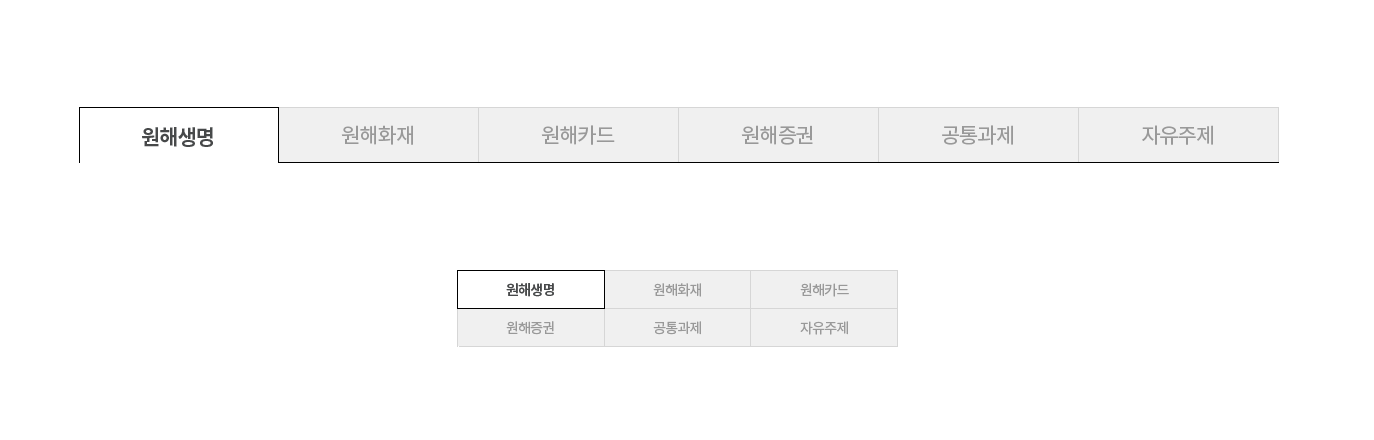
<style>
.page{position:relative;width:1374px;height:440px;background:#ffffff}
.page>*{position:absolute;margin:0}
.t1{font:21px "NotoSansKR-Regular";letter-spacing:-0.05em;color:#999999}
.t2{font:21px "NotoSansKR-Bold";letter-spacing:-0.05em;color:#47494a}
.t3{font:14px "NotoSansKR-Bold";letter-spacing:-0.05em;color:#47494a}
.t4{font:14px "NotoSansKR-Regular";letter-spacing:-0.05em;color:#999999}
</style>
<div class="page">
<p class="t1" style="left:341px;top:125px;width:72px;height:20px">원해화재</p>
<p class="t1" style="left:541px;top:125px;width:74px;height:20px">원해카드</p>
<p class="t1" style="left:741px;top:125px;width:72px;height:20px">원해증권</p>
<p class="t1" style="left:942px;top:125px;width:71px;height:20px">공통과제</p>
<p class="t1" style="left:1142px;top:125px;width:71px;height:20px">자유주제</p>
<p class="t2" style="left:142px;top:127px;width:71px;height:20px">원해생명</p>
<p class="t3" style="left:506px;top:283px;width:48px;height:14px">원해생명</p>
<p class="t4" style="left:653px;top:283px;width:48px;height:14px">원해화재</p>
<p class="t4" style="left:800px;top:283px;width:49px;height:14px">원해카드</p>
<p class="t4" style="left:506px;top:321px;width:48px;height:14px">원해증권</p>
<p class="t4" style="left:653px;top:321px;width:48px;height:14px">공통과제</p>
<p class="t4" style="left:800px;top:321px;width:48px;height:14px">자유주제</p>
</div>
